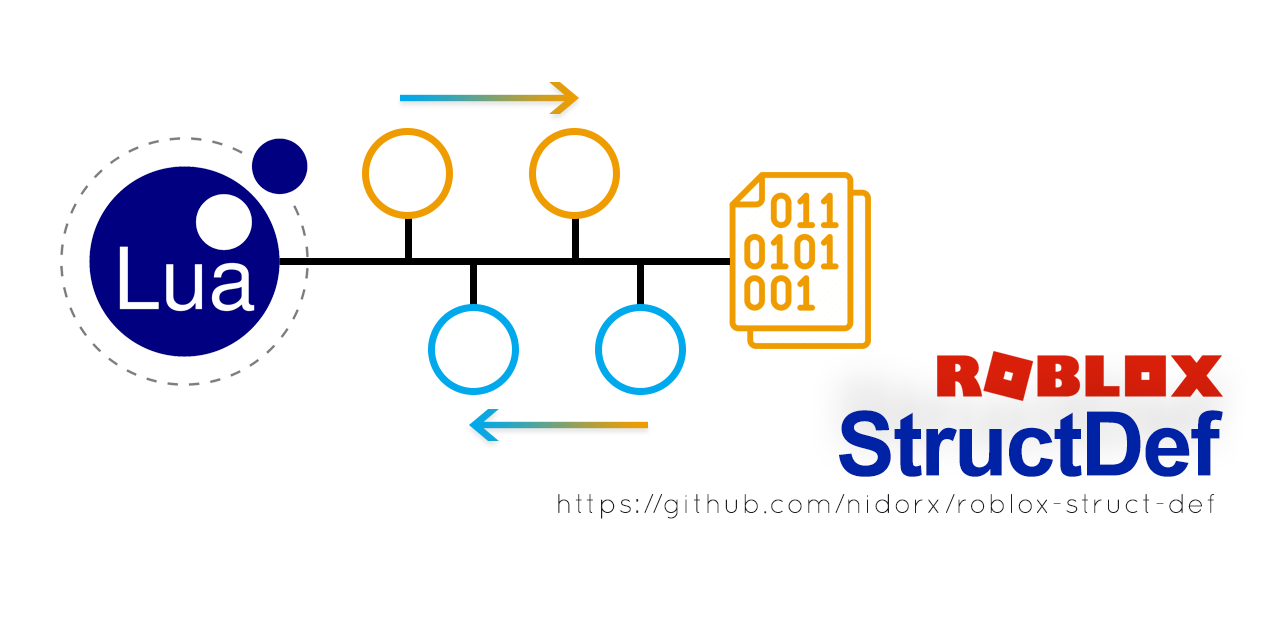
<style>
.page{position:relative;width:1280px;height:640px;background:#ffffff}
.page>*{position:absolute;margin:0}
.t1{font:152.9px "Arial-BoldMT";letter-spacing:-0.05em;color:#0023a6;font-weight:bold}
.t2{font:46.2px "Quicksand-Light";letter-spacing:0.05em;color:#1b1f23;font-weight:bold}
</style>
<div class="page">
<p class="t1" style="left:839px;top:410px;width:384px;height:67px">StructDef</p>
<p class="t2" style="left:558px;top:494px;width:657px;height:25px">https://github.com/nidorx/roblox-struct-def</p>
</div>
